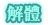
<style>
.page{position:relative;width:48px;height:25px}
.page>*{position:absolute;margin:0}
.t1{font:17px "RyuminPro-ExBold";color:#9cffed}
</style>
<div class="page">
<p class="t1" style="left:7px;top:5px;width:33px;height:17px">解體</p>
</div>
